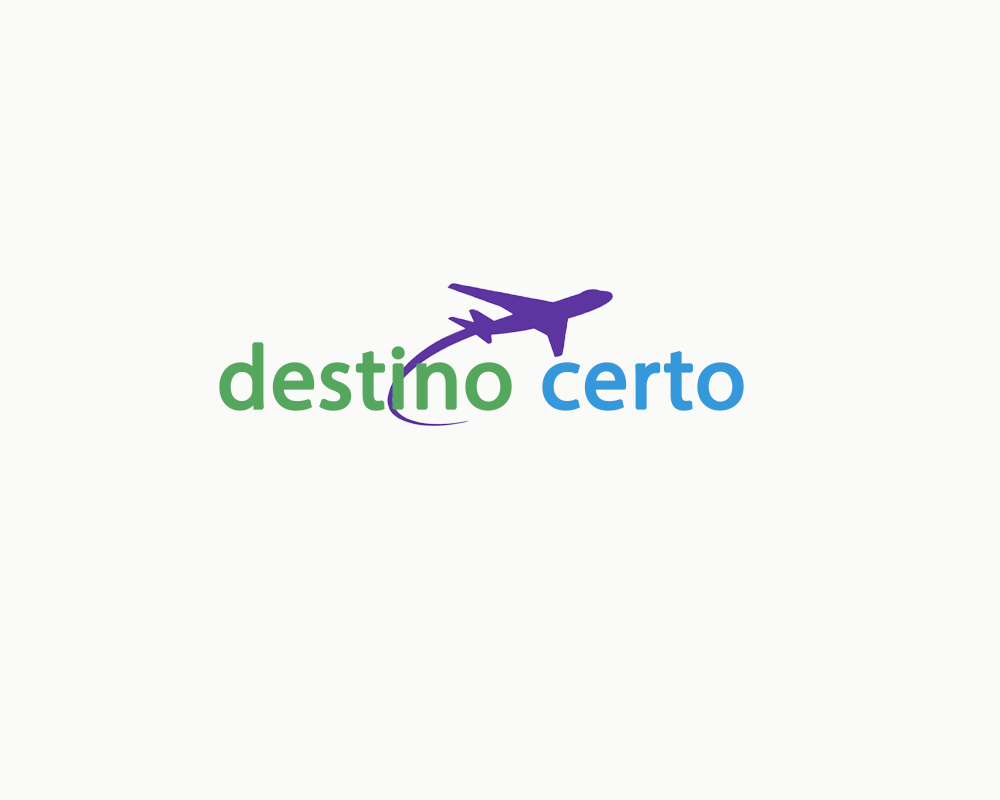
<style>
.page{position:relative;width:1000px;height:800px;background:#fafaf9}
.page>*{position:absolute;margin:0}
.t1{font:125px "MyriadArabic-Regular";color:#54a75c;font-weight:bold}
.t2{font:125px "MyriadArabic-Regular";color:#3498db;font-weight:bold}
</style>
<div class="page">
<p class="t1" style="left:219px;top:342px;width:525px;height:69px">destino <span class="t2">certo</span></p>
</div>
